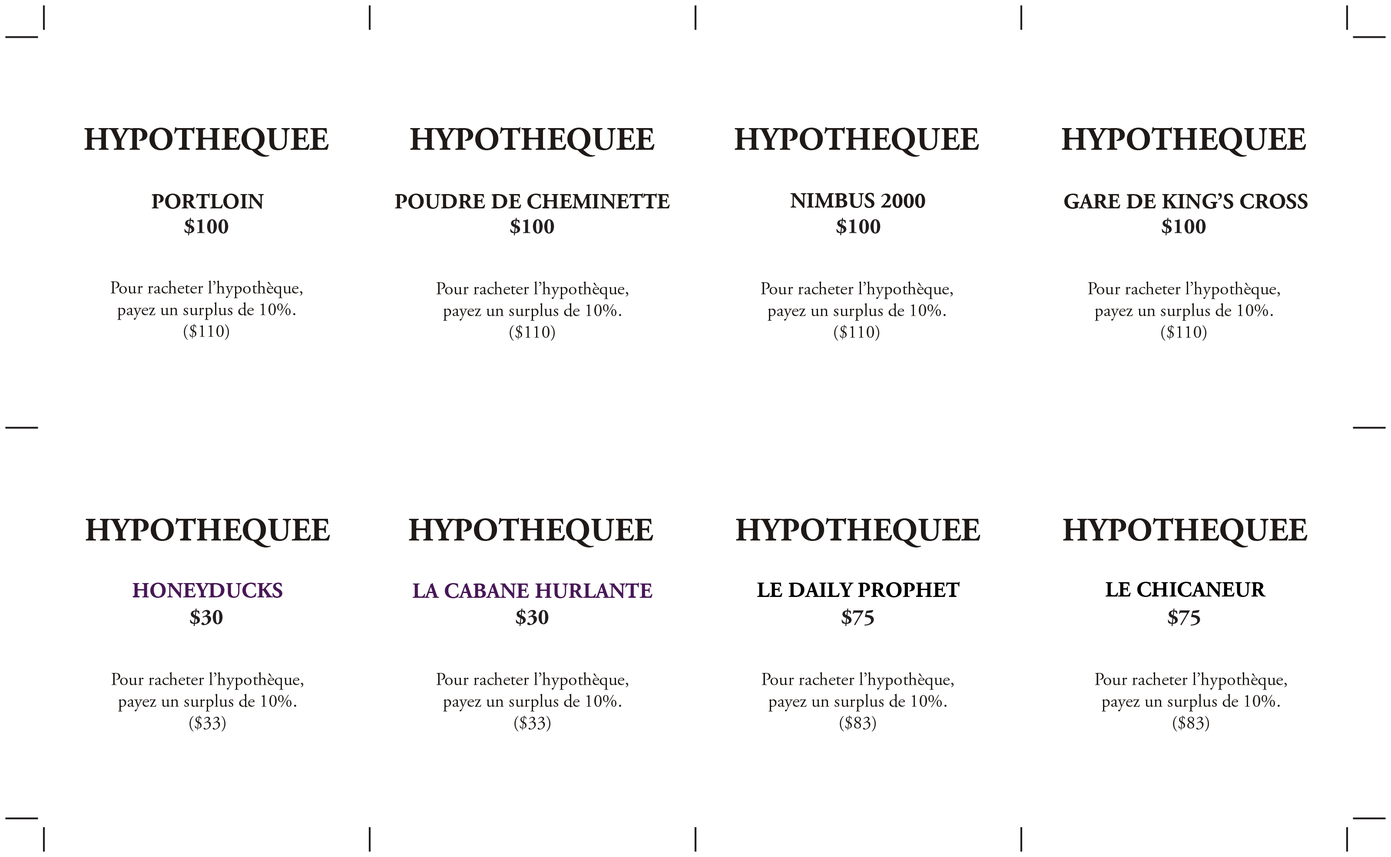
<style>
.page{position:relative;width:1391px;height:857px;background:#ffffff}
.page>*{position:absolute;margin:0}
.t1{font:32.6px "AGaramond-Bold";color:#1f1a17}
.t2{font:21.7px "AGaramond-Bold";color:#1f1a17}
.t3{font:18.1px "AGaramond-Regular";color:#1f1a17}
.t4{font:21.7px "AGaramond-Bold";color:#481856}
.t5{font:21.7px "AGaramond-Bold";color:#010001}
</style>
<div class="page">
<p class="t1" style="left:84px;top:127px;width:245px;height:30px">HYPOTHEQUEE</p>
<p class="t1" style="left:410px;top:127px;width:245px;height:30px">HYPOTHEQUEE</p>
<p class="t1" style="left:734px;top:127px;width:245px;height:30px">HYPOTHEQUEE</p>
<p class="t1" style="left:1062px;top:127px;width:244px;height:30px">HYPOTHEQUEE</p>
<p class="t2" style="left:152px;top:193px;width:112px;height:16px">PORTLOIN</p>
<p class="t2" style="left:395px;top:193px;width:275px;height:16px">POUDRE DE CHEMINETTE</p>
<p class="t2" style="left:790px;top:193px;width:135px;height:15px">NIMBUS 2000</p>
<p class="t2" style="left:1064px;top:193px;width:243px;height:16px">GARE DE KING’S CROSS</p>
<p class="t3" style="left:111px;top:281px;width:191px;height:59px;text-align:center">Pour racheter l’hypothèque,<br>payez un surplus de 10%.<br>($110)</p>
<p class="t3" style="left:437px;top:281px;width:191px;height:60px;text-align:center">Pour racheter l’hypothèque,<br>payez un surplus de 10%.<br>($110)</p>
<p class="t3" style="left:761px;top:281px;width:192px;height:60px;text-align:center">Pour racheter l’hypothèque,<br>payez un surplus de 10%.<br>($110)</p>
<p class="t3" style="left:1088px;top:281px;width:192px;height:60px;text-align:center">Pour racheter l’hypothèque,<br>payez un surplus de 10%.<br>($110)</p>
<p class="t1" style="left:86px;top:518px;width:244px;height:30px">HYPOTHEQUEE</p>
<p class="t1" style="left:409px;top:518px;width:244px;height:30px">HYPOTHEQUEE</p>
<p class="t1" style="left:736px;top:518px;width:244px;height:30px">HYPOTHEQUEE</p>
<p class="t1" style="left:1063px;top:518px;width:244px;height:30px">HYPOTHEQUEE</p>
<p class="t4" style="left:132px;top:583px;width:150px;height:15px">HONEYDUCKS</p>
<p class="t4" style="left:413px;top:583px;width:239px;height:16px">LA CABANE HURLANTE</p>
<p class="t5" style="left:757px;top:582px;width:203px;height:16px">LE DAILY PROPHET</p>
<p class="t5" style="left:1105px;top:582px;width:161px;height:15px">LE CHICANEUR</p>
<p class="t3" style="left:112px;top:672px;width:191px;height:60px;text-align:center">Pour racheter l’hypothèque,<br>payez un surplus de 10%.<br>($33)</p>
<p class="t3" style="left:437px;top:672px;width:191px;height:60px;text-align:center">Pour racheter l’hypothèque,<br>payez un surplus de 10%.<br>($33)</p>
<p class="t3" style="left:762px;top:672px;width:191px;height:60px;text-align:center">Pour racheter l’hypothèque,<br>payez un surplus de 10%.<br>($83)</p>
<p class="t3" style="left:1095px;top:672px;width:192px;height:60px;text-align:center">Pour racheter l’hypothèque,<br>payez un surplus de 10%.<br>($83)</p>
</div>
